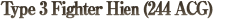
<style>
.page{position:relative;width:229px;height:19px;background:#ffffff}
.page>*{position:absolute;margin:0}
.t1{font:18px "RyuminPro-ExBold";letter-spacing:-0.08em;color:#4a3f32;font-weight:bold;scale:0.9 1}
</style>
<div class="page">
<p class="t1" style="left:0px;top:0px;width:213px;height:19px">Type 3 Fighter Hien (244 ACG)</p>
</div>
